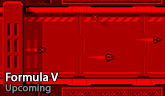
<style>
.page{position:relative;width:165px;height:96px;background:#aa0000}
.page>*{position:absolute;margin:0}
.t1{font:12px/11px "MyriadPro-Regular";color:#ffffff;font-weight:bold}
.t2{font:10px/10px "MyriadPro-Regular";color:#8e8e8e;font-weight:bold}
</style>
<div class="page">
<p class="t1" style="left:5px;top:72px;width:54px;height:22px">Formula V<br><span class="t2">Upcoming</span></p>
</div>
